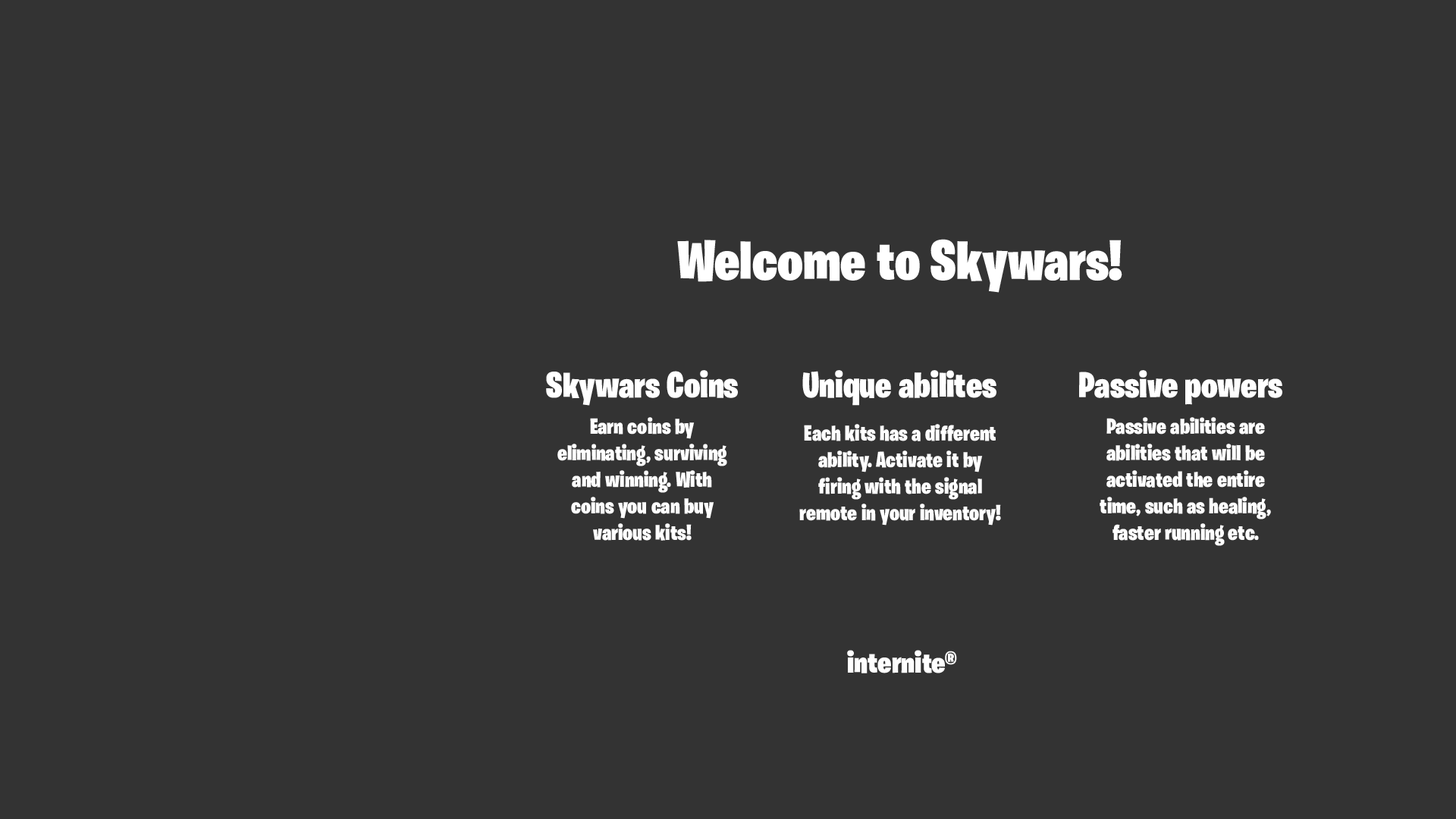
<style>
.page{position:relative;width:1456px;height:819px;background:#333333}
.page>*{position:absolute;margin:0}
.t1{font:56.9px "BurbankBigCondensed-Black";color:#ffffff}
.t2{font:36.4px "BurbankBigCondensed-Black";color:#ffffff}
.t3{font:22.1px "BurbankBigCondensed-Black";color:#ffffff}
.t4{font:30px "BurbankBigCondensed-Black";color:#ffffff;scale:1.05 1}
</style>
<div class="page">
<p class="t1" style="left:677px;top:239px;width:445px;height:54px">Welcome to Skywars!</p>
<p class="t2" style="left:546px;top:370px;width:192px;height:36px">Skywars Coins</p>
<p class="t2" style="left:802px;top:370px;width:194px;height:36px">Unique abilites</p>
<p class="t2" style="left:1079px;top:370px;width:203px;height:35px">Passive powers</p>
<p class="t3" style="left:557px;top:417px;width:170px;height:124px;text-align:center">Earn coins by eliminating, surviving and winning. With coins you can buy various kits!</p>
<p class="t3" style="left:799px;top:424px;width:202px;height:102px;text-align:center">Each kits has a different ability. Activate it by firing with the signal remote in your inventory!</p>
<p class="t3" style="left:1100px;top:417px;width:171px;height:129px;text-align:center">Passive abilities are abilities that will be activated the entire time, such as healing, faster running etc.</p>
<p class="t4" style="left:847px;top:650px;width:110px;height:23px">internite®</p>
</div>
